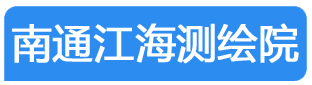
<style>
.page{position:relative;width:312px;height:85px;background:#2d8cf0}
.page>*{position:absolute;margin:0}
.t1{font:40px "MicrosoftYaHei";color:#ffffff;font-weight:bold}
</style>
<div class="page">
<p class="t1" style="left:12px;top:23px;width:287px;height:41px">南通江海测绘院</p>
</div>
